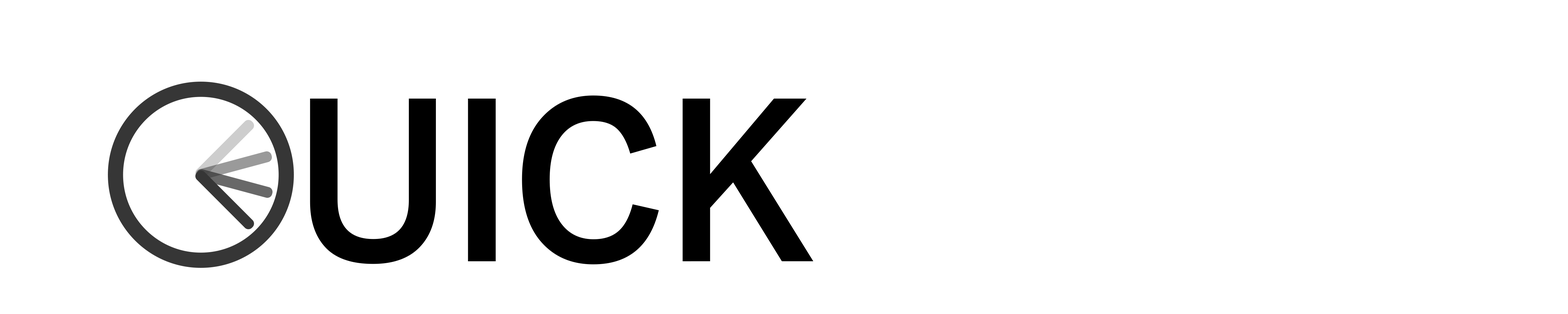
<style>
.page{position:relative;width:1568px;height:314px;background:#ffffff}
.page>*{position:absolute;margin:0}
.t1{font:219.5px "BentonSans-Medium";letter-spacing:-0.02em;color:#000000}
</style>
<div class="page">
<p class="t1" style="left:310px;top:95px;width:503px;height:169px">UICK</p>
</div>
